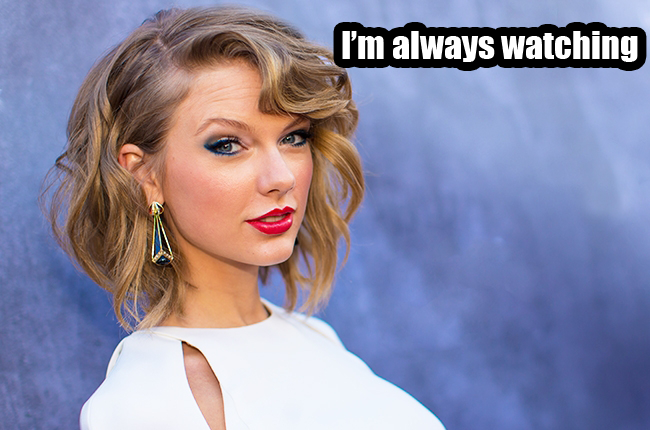
<style>
.page{position:relative;width:650px;height:430px}
.page>*{position:absolute;margin:0}
.t1{font:36px "Impact";color:#ffffff}
</style>
<div class="page">
<p class="t1" style="left:342px;top:31px;width:296px;height:31px">I’m always watching</p>
</div>
